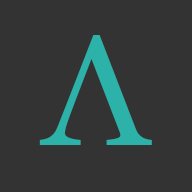
<style>
.page{position:relative;width:192px;height:192px;background:#333333}
.page>*{position:absolute;margin:0}
.t1{font:156px "Georgia";color:#2cb2a9}
</style>
<div class="page">
<p class="t1" style="left:39px;top:35px;width:113px;height:110px">Λ</p>
</div>
